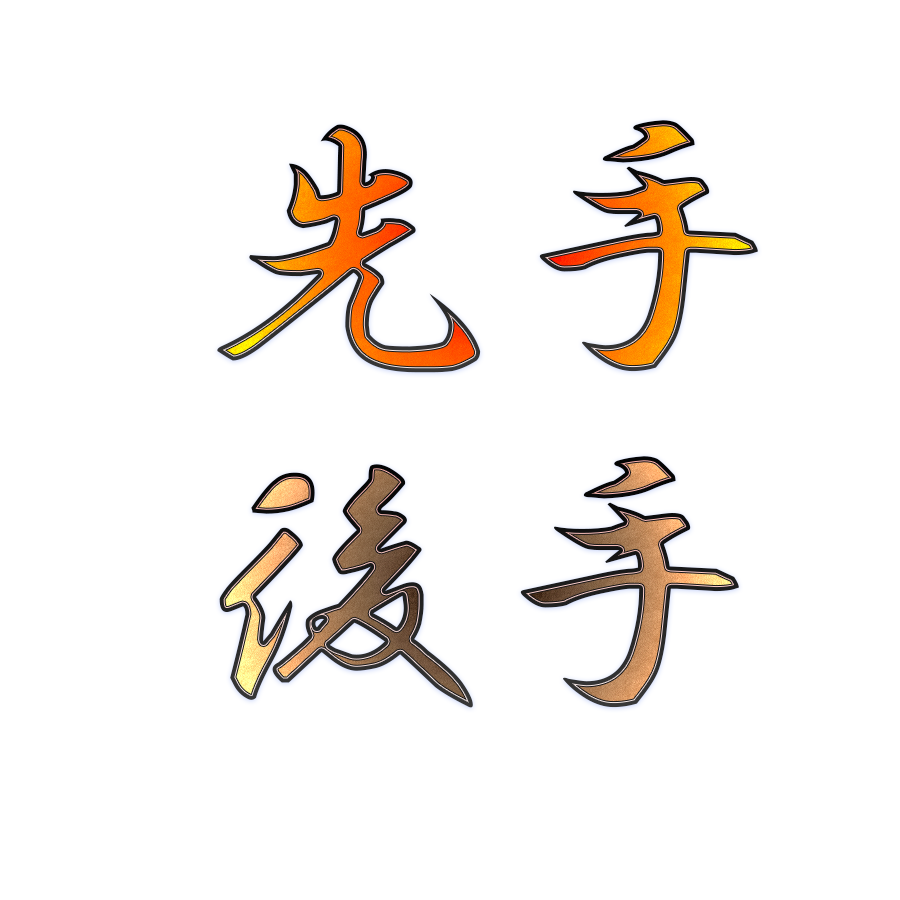
<style>
.page{position:relative;width:900px;height:900px;background:#ffffff}
.page>*{position:absolute;margin:0}
.t1{font:300px "HGSGyoshotai"}
</style>
<div class="page">
<p class="t1" style="left:217px;top:120px;width:541px;height:253px">先手</p>
<p class="t1" style="left:219px;top:456px;width:520px;height:252px">後手</p>
</div>
